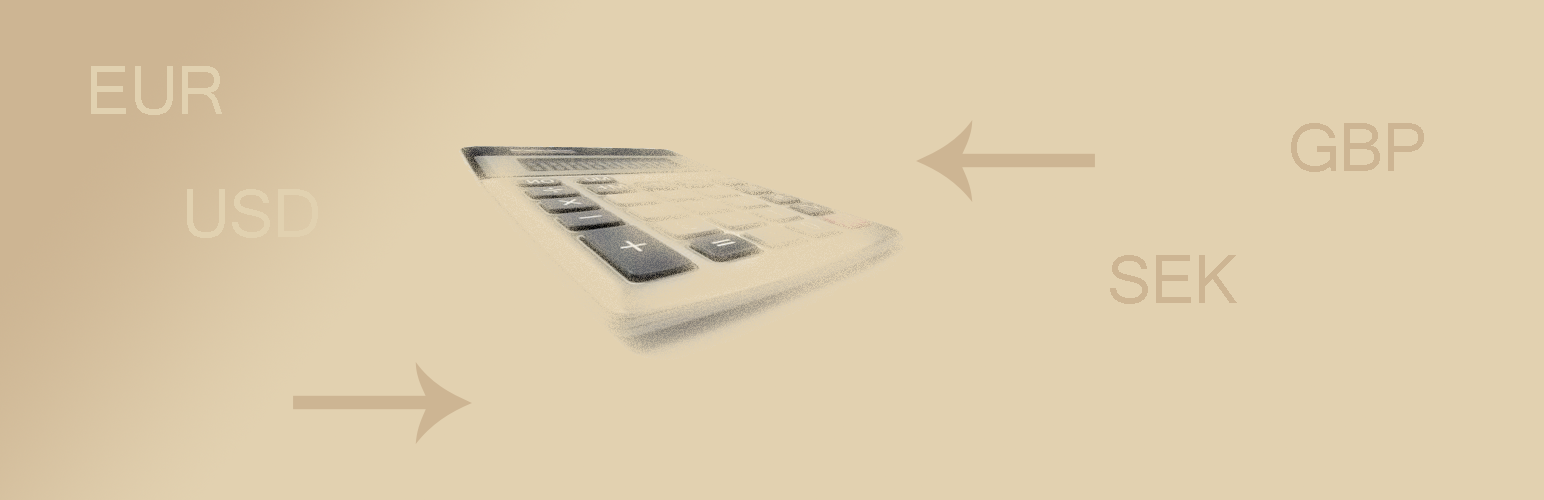
<style>
.page{position:relative;width:1544px;height:500px;background:#e2d1b0}
.page>*{position:absolute;margin:0}
.t1{font:72px "Shruti";letter-spacing:-0.009em;color:#e1d1b0}
.t2{font:72px "Shruti";letter-spacing:-0.009em;color:#cdb593}
</style>
<div class="page">
<p class="t1" style="left:91px;top:66px;width:131px;height:49px">EUR</p>
<p class="t2" style="left:1291px;top:123px;width:133px;height:49px">GBP</p>
<p class="t1" style="left:187px;top:189px;width:131px;height:49px">USD</p>
<p class="t2" style="left:1110px;top:255px;width:127px;height:49px">SEK</p>
</div>
